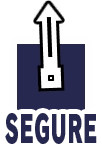
<style>
.page{position:relative;width:102px;height:150px;background:#ffffff}
.page>*{position:absolute;margin:0}
.t1{font:37.3px "RodinNTLGPro-UB";color:#272850;scale:0.55 1}
</style>
<div class="page">
<p class="t1" style="left:5px;top:113px;width:92px;height:31px">SEGURE</p>
</div>
